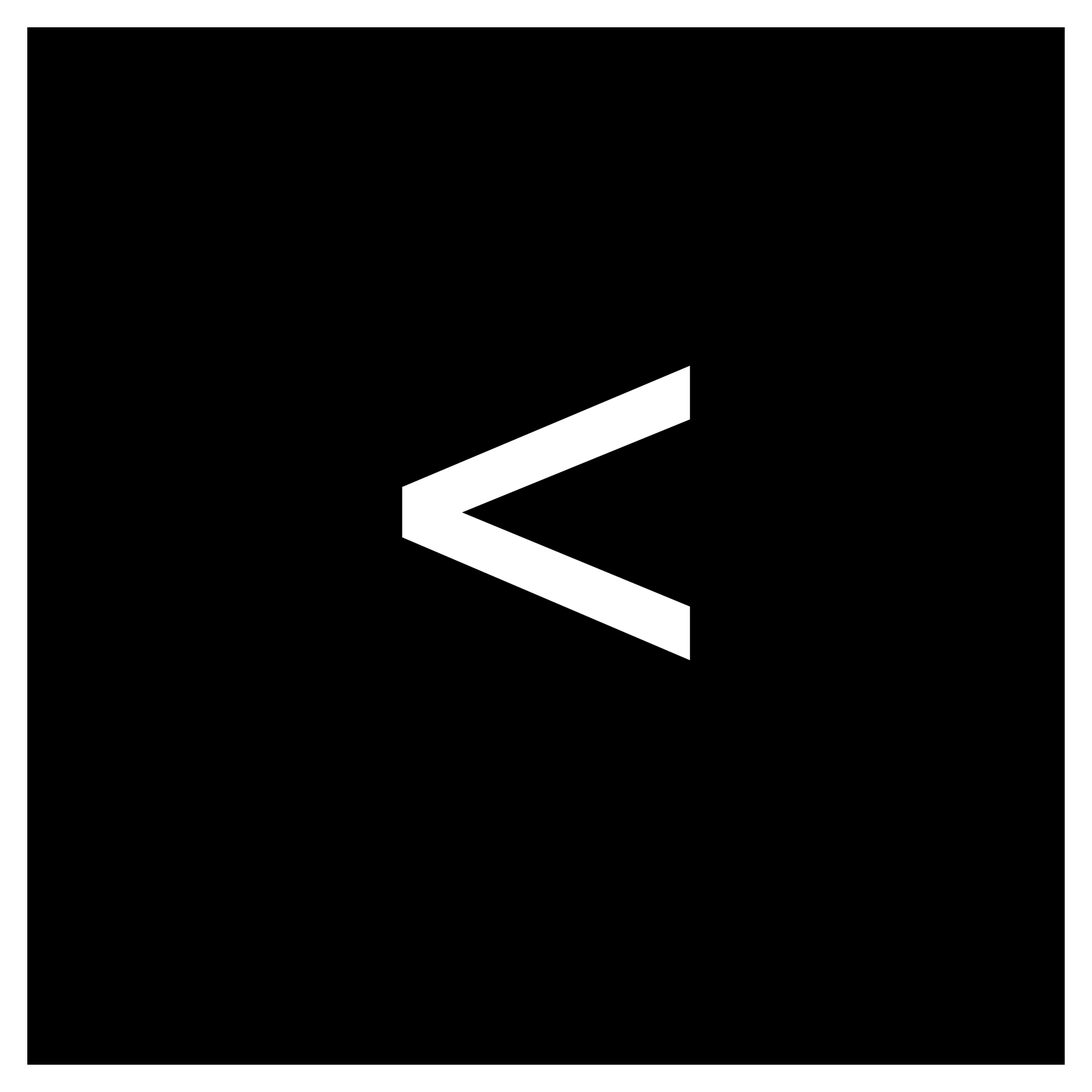
<style>
.page{position:relative;width:1092px;height:1092px;background:#000000}
.page>*{position:absolute;margin:0}
.t1{font:606.7px "ArialMT";color:#ffffff}
</style>
<div class="page">
<p class="t1" style="left:402px;top:366px;width:288px;height:294px">&lt;</p>
</div>
